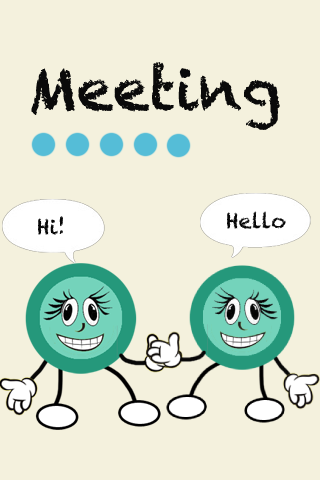
<style>
.page{position:relative;width:320px;height:480px;background:#f4f1dd}
.page>*{position:absolute;margin:0}
.t1{font:20.8px "Chalkduster";color:#070707}
</style>
<div class="page">
<p class="t1" style="left:38px;top:216px;width:25px;height:19px">Hi!</p>
<p class="t1" style="left:227px;top:211px;width:59px;height:18px">Hello</p>
</div>
